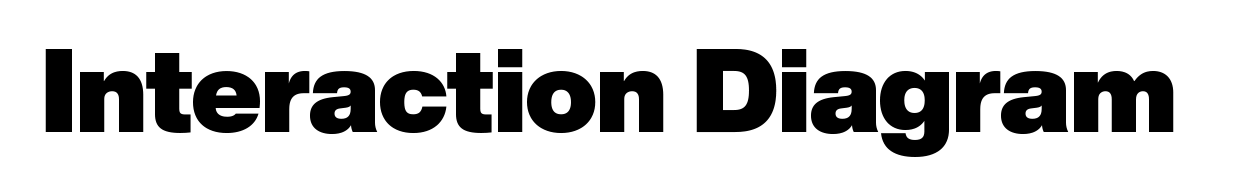
<style>
.page{position:relative;width:1235px;height:195px;background:#ffffff}
.page>*{position:absolute;margin:0}
.t1{font:116.7px "HelveticaNowDisplay-XBlk";letter-spacing:-0.01em;color:#000000}
</style>
<div class="page">
<p class="t1" style="left:45px;top:49px;width:1129px;height:108px">Interaction Diagram</p>
</div>
